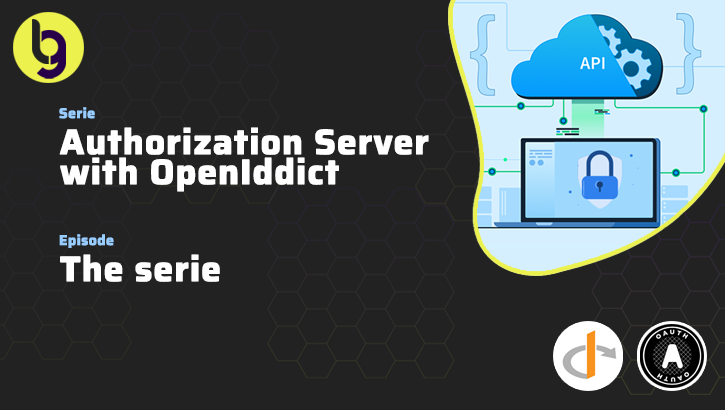
<style>
.page{position:relative;width:725px;height:410px;background:#222222}
.page>*{position:absolute;margin:0}
.t1{font:14px "Saira-Bold";letter-spacing:0.01em;color:#99ccff;font-weight:bold}
.t2{font:35px/30px "Saira-Bold";letter-spacing:0.01em;color:#ffffff;font-weight:bold}
.t3{font:35px "Saira-Bold";letter-spacing:0.01em;color:#ffffff;font-weight:bold}
</style>
<div class="page">
<p class="t1" style="left:59px;top:107px;width:36px;height:12px">Serie</p>
<p class="t2" style="left:59px;top:127px;width:370px;height:65px">Authorization Server<br>with OpenIddict</p>
<p class="t1" style="left:59px;top:234px;width:55px;height:14px">Episode</p>
<p class="t3" style="left:60px;top:254px;width:160px;height:28px">The serie</p>
</div>
